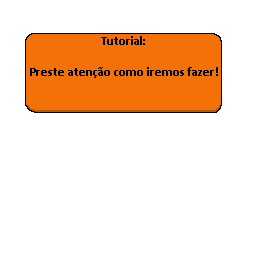
<style>
.page{position:relative;width:256px;height:256px;background:#ffffff}
.page>*{position:absolute;margin:0}
.t1{font:12.5px "Calibri-Bold";color:#000000}
</style>
<div class="page">
<p class="t1" style="left:101px;top:36px;width:44px;height:9px">Tutorial:</p>
<p class="t1" style="left:30px;top:67px;width:188px;height:11px">Preste atenção como iremos fazer!</p>
</div>
